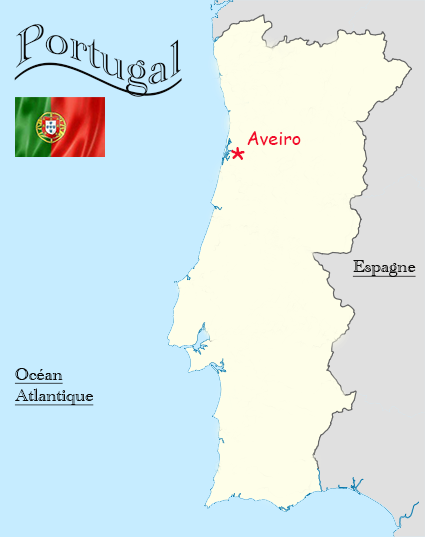
<style>
.page{position:relative;width:425px;height:537px;background:#c6ecff}
.page>*{position:absolute;margin:0}
.t1{font:48px "AcademyEngravedLetPlain";color:#0a0908;text-decoration:underline}
.t2{font:18px "ComicSansMS";color:#f20c2d}
.t3{font:30px "ComicSansMS";color:#f20c2d}
.t4{font:18px "AcademyEngravedLetPlain";color:#0a0908;text-decoration:underline}
</style>
<div class="page">
<p class="t1" style="left:14px;top:24px;width:168px;height:73px">Portugal</p>
<p class="t2" style="left:247px;top:131px;width:54px;height:15px">Aveiro</p>
<p class="t3" style="left:231px;top:147px;width:14px;height:13px">*</p>
<p class="t4" style="left:352px;top:260px;width:64px;height:17px">Espagne</p>
<p class="t4" style="left:14px;top:368px;width:80px;height:38px">Océan<br>Atlantique</p>
</div>
